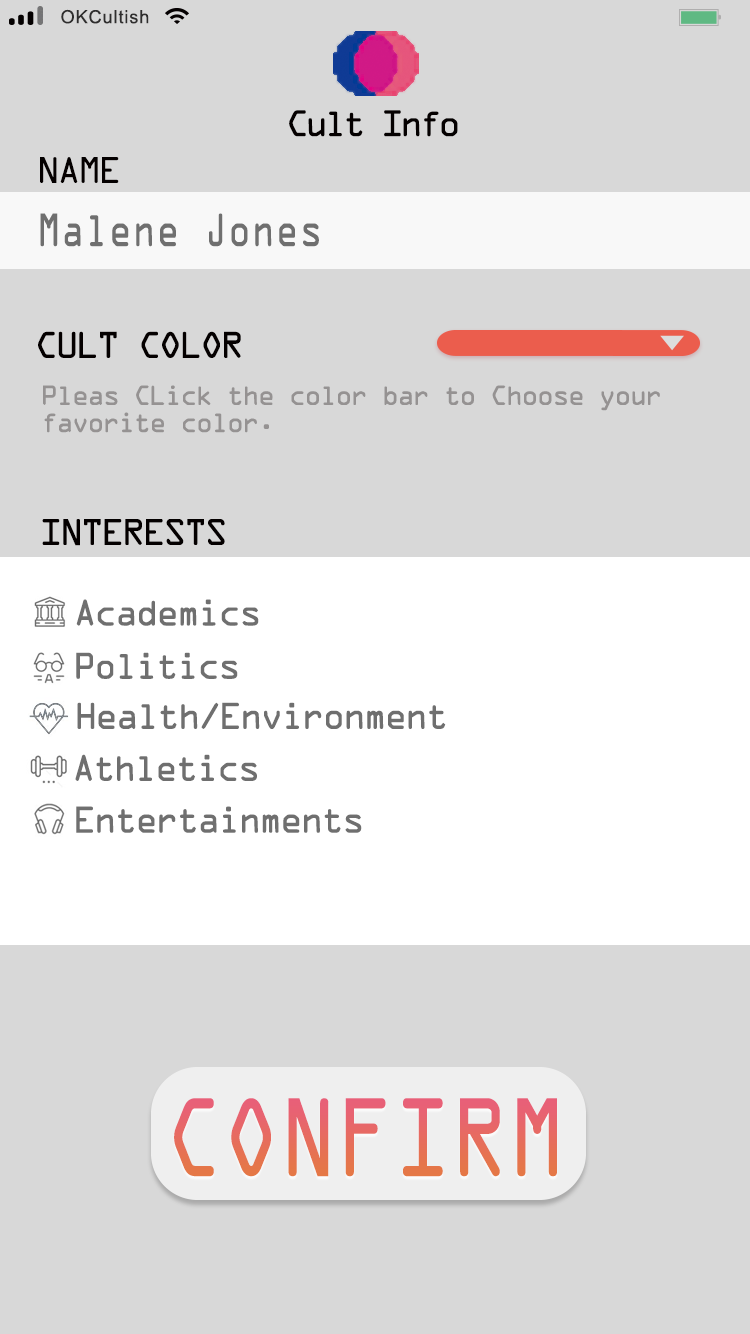
<style>
.page{position:relative;width:750px;height:1334px;background:#d8d8d8}
.page>*{position:absolute;margin:0}
.t1{font:18.1px "ArialMT";letter-spacing:0.05em;color:#2f2e2e}
.t2{font:33.3px "OCRAStd";letter-spacing:-0.15em;color:#040000}
.t3{font:33.3px "OCRAStd";letter-spacing:-0.1em;color:#040000}
.t4{font:41.7px "OCRAStd";letter-spacing:-0.005em;color:#6f6f6f;scale:0.8 1}
.t5{font:25px/27.2px "OCRAStd";letter-spacing:-0.1em;color:#959292}
.t6{font:33.3px "OCRAStd";letter-spacing:-0.1em;color:#6f6f6f}
.t7{font:100px "OCRAStd";letter-spacing:-0.005em;color:#e76964;scale:0.8 1}
</style>
<div class="page">
<p class="t1" style="left:61px;top:9px;width:88px;height:15px">OKCultish</p>
<p class="t2" style="left:289px;top:110px;width:169px;height:27px">Cult Info</p>
<p class="t3" style="left:40px;top:157px;width:79px;height:26px">NAME</p>
<p class="t4" style="left:40px;top:213px;width:279px;height:34px">Malene Jones</p>
<p class="t3" style="left:38px;top:331px;width:203px;height:27px">CULT COLOR</p>
<p class="t5" style="left:43px;top:385px;width:617px;height:48px">Pleas CLick the color bar to Choose your <br>favorite color.</p>
<p class="t3" style="left:42px;top:519px;width:183px;height:27px">INTERESTS</p>
<p class="t6" style="left:76px;top:599px;width:183px;height:27px">Academics</p>
<p class="t6" style="left:76px;top:652px;width:162px;height:27px">Politics</p>
<p class="t6" style="left:77px;top:702px;width:369px;height:27px">Health/Environment</p>
<p class="t6" style="left:75px;top:754px;width:182px;height:27px">Athletics</p>
<p class="t6" style="left:76px;top:806px;width:286px;height:27px">Entertainments</p>
<p class="t7" style="left:174px;top:1098px;width:383px;height:79px">CONFIRM</p>
</div>
